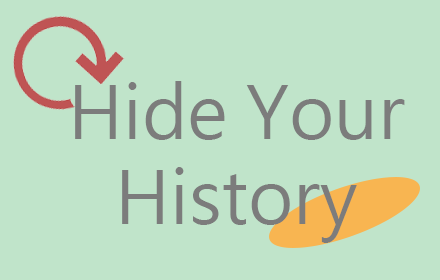
<style>
.page{position:relative;width:440px;height:280px;background:#c0e4ca}
.page>*{position:absolute;margin:0}
.t1{font:72px "MicrosoftJhengHeiUIRegular";color:#7c7c7c}
</style>
<div class="page">
<p class="t1" style="left:75px;top:81px;width:330px;height:59px">Hide Your</p>
<p class="t1" style="left:122px;top:167px;width:235px;height:76px">History</p>
</div>
